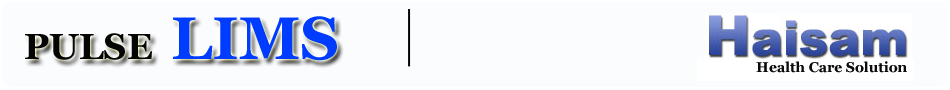
<style>
.page{position:relative;width:950px;height:90px;background:#fbfcfe}
.page>*{position:absolute;margin:0}
.t1{font:36px "Georgia-Bold";color:#050505}
.t2{font:60px "Georgia-Bold";color:#003cff}
.t3{font:14px "Georgia-Bold";color:#0c0c0c}
</style>
<div class="page">
<p class="t1" style="left:25px;top:16px;width:312px;height:45px">PULSE <span class="t2">LIMS</span></p>
<p class="t3" style="left:756px;top:61px;width:151px;height:12px">Health Care Solution</p>
</div>
